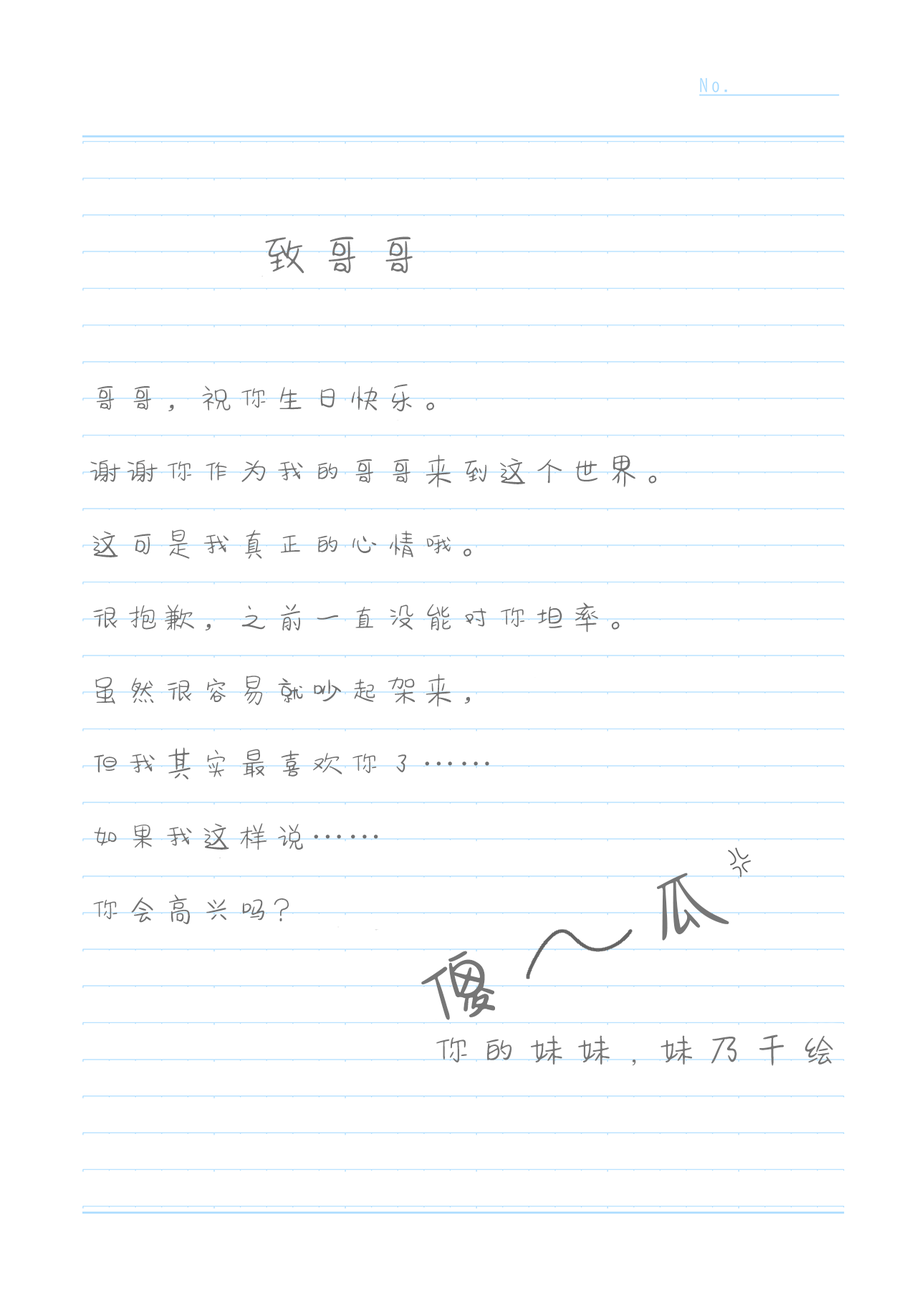
<style>
.page{position:relative;width:917px;height:1301px;background:#ffffff}
.page>*{position:absolute;margin:0}
.t1{font:52.3px "FZSEYBJW--GB1-0";letter-spacing:0.09em;color:#767676}
.t2{font:34px/73.1px "FZSEYBJW--GB1-0";letter-spacing:0.09em;color:#717171}
.t3{font:85.2px "FZSEYBJW--GB1-0";letter-spacing:0.09em;color:#767676}
.t4{font:89.8px "FZSEYBJW--GB1-0";letter-spacing:0.09em;color:#767676;text-transform:uppercase}
.t5{font:43.5px "FZSEYBJW--GB1-0";letter-spacing:0.09em;color:#767676}
</style>
<div class="page">
<p class="t1" style="left:265px;top:236px;width:148px;height:38px">致哥哥</p>
<p class="t2" style="left:90px;top:384px;width:567px;height:540px">哥哥，祝你生日快乐。<br>谢谢你作为我的哥哥来到这个世界。<br>这可是我真正的心情哦。<br>很抱歉，之前一直没能对你坦率。<br>虽然很容易就吵起架来，<br>但我其实最喜欢你了……<br>如果我这样说……<br>你会高兴吗？</p>
<p class="t3" style="left:656px;top:872px;width:73px;height:68px;rotate:-17deg">瓜</p>
<p class="t4" style="left:421px;top:950px;width:74px;height:70px;rotate:-17deg">傻</p>
<p class="t5" style="left:436px;top:1034px;width:397px;height:32px">你的妹妹,妹乃千绘</p>
</div>
